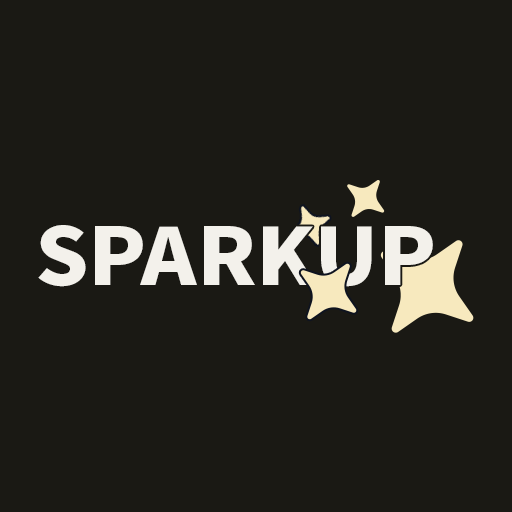
<style>
.page{position:relative;width:512px;height:512px;background:#1a1914}
.page>*{position:absolute;margin:0}
.t1{font:78.7px "KintoSans-Black";letter-spacing:-0.003em;color:#f3f1eb;scale:1.07 1}
</style>
<div class="page">
<p class="t1" style="left:38px;top:225px;width:395px;height:62px">SPARKUP</p>
</div>
